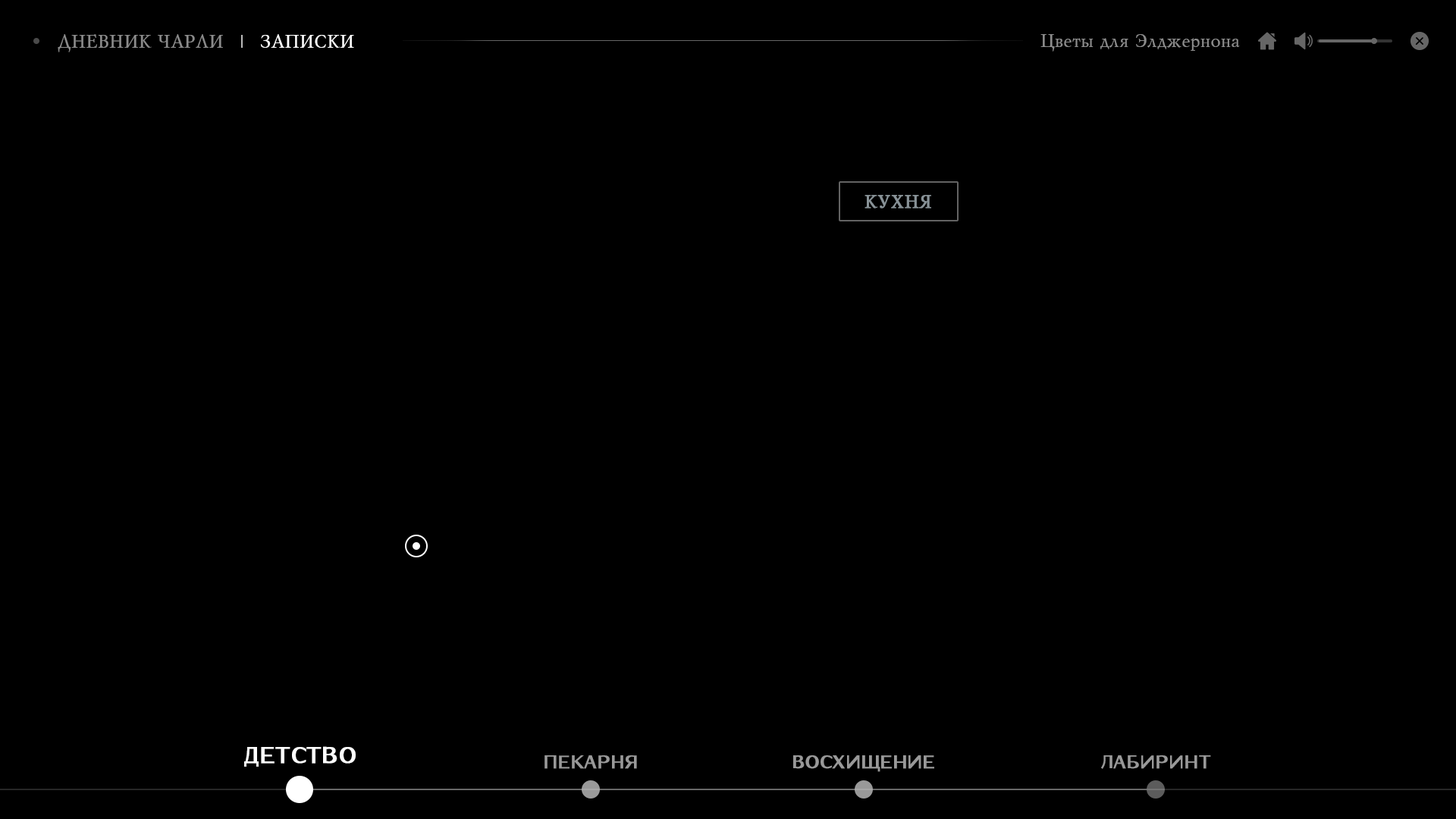
<style>
.page{position:relative;width:1456px;height:819px;background:#000000}
.page>*{position:absolute;margin:0}
.t1{font:18.2px "MyslCyrillic";color:#8b8b8b}
.t2{font:18.2px "MyslCyrillic";color:#ffffff}
.t3{font:18.2px "MyslBoldCyrillic";color:#889297;font-weight:bold}
.t4{font:22.6px "Kurier-Bold";color:#ffffff;font-weight:bold}
.t5{font:18.1px "Kurier-Bold";color:#999999;font-weight:bold}
.t6{font:18.1px "KurierHeavy-Regular";color:#999999;font-weight:bold}
</style>
<div class="page">
<p class="t1" style="left:58px;top:34px;width:165px;height:18px">ДНЕВНИК ЧАРЛИ</p>
<p class="t2" style="left:261px;top:34px;width:93px;height:14px">ЗАПИСКИ</p>
<p class="t1" style="left:1040px;top:34px;width:200px;height:18px">Цветы для Элджернона</p>
<p class="t3" style="left:864px;top:195px;width:67px;height:14px">КУХНЯ</p>
<p class="t4" style="left:244px;top:746px;width:112px;height:21px">ДЕТСТВО</p>
<p class="t5" style="left:544px;top:755px;width:93px;height:14px">ПЕКАРНЯ</p>
<p class="t6" style="left:793px;top:755px;width:141px;height:17px">ВОСХИЩЕНИЕ</p>
<p class="t5" style="left:1101px;top:755px;width:110px;height:14px">ЛАБИРИНТ</p>
</div>
